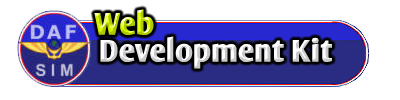
<style>
.page{position:relative;width:400px;height:100px;background:#ffffff}
.page>*{position:absolute;margin:0}
.t1{font:30px "OliJo-Bold"}
</style>
<div class="page">
<p class="t1" style="left:94px;top:9px;width:60px;height:26px">Web</p>
<p class="t1" style="left:100px;top:36px;width:232px;height:33px">Development Kit</p>
</div>
